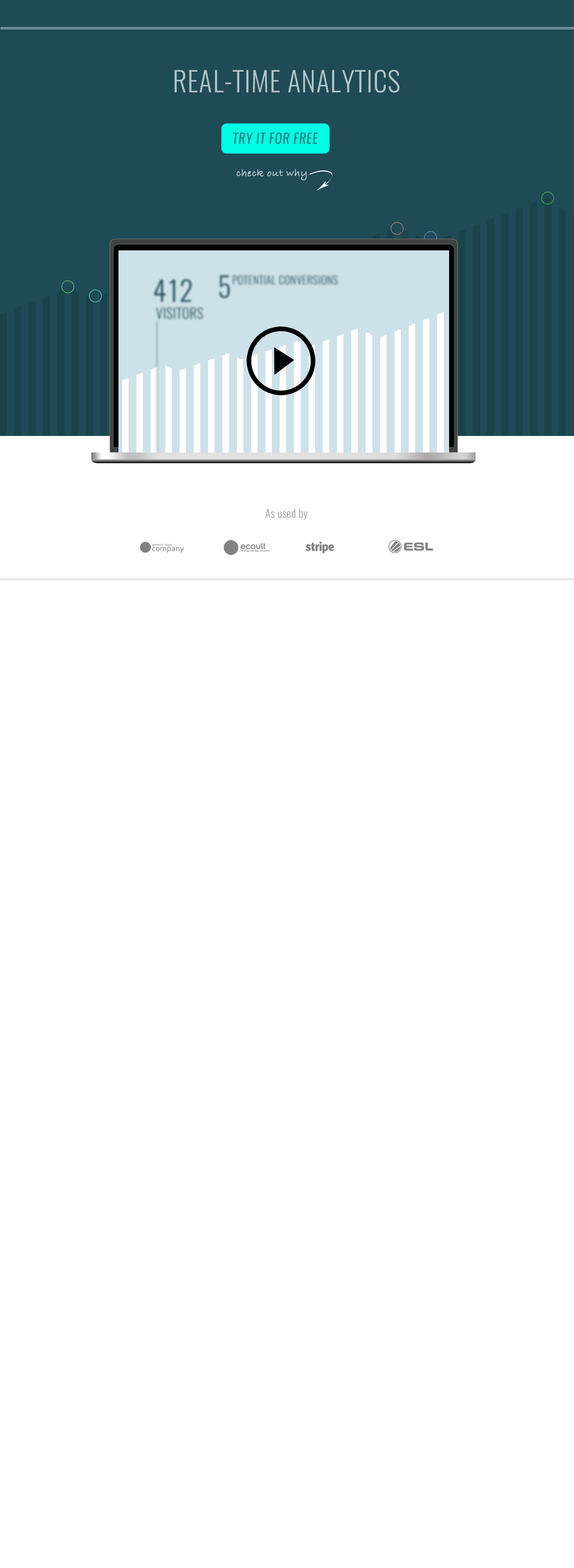
<style>
.page{position:relative;width:574px;height:1568px;background:#ffffff}
.page>*{position:absolute;margin:0}
.t1{font:27.6px "Oswald-Light";letter-spacing:0.025em;color:#b7c5c8}
.t2{font:13.7px "Oswald-RegularItalic";letter-spacing:0.025em;color:#148583}
.t3{font:11px "BradleyHandITCTTBold";letter-spacing:0.025em;color:#cbd5d8}
.t4{font:11px "Oswald-Light";letter-spacing:0.025em;color:#9a9999}
</style>
<div class="page">
<p class="t1" style="left:175px;top:70px;width:225px;height:23px">REAL-TIME ANALYTICS</p>
<p class="t2" style="left:233px;top:132px;width:85px;height:12px">TRY IT FOR FREE</p>
<p class="t3" style="left:237px;top:169px;width:70px;height:12px">check out why</p>
<p class="t4" style="left:266px;top:509px;width:42px;height:11px">As used by</p>
</div>
